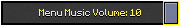
<style>
.page{position:relative;width:180px;height:26px;background:#373737}
.page>*{position:absolute;margin:0}
.t1{font:8px "Minecraft";color:#fff25c}
</style>
<div class="page">
<p class="t1" style="left:38px;top:9px;width:103px;height:7px">Menu Music Volume: 10</p>
</div>
